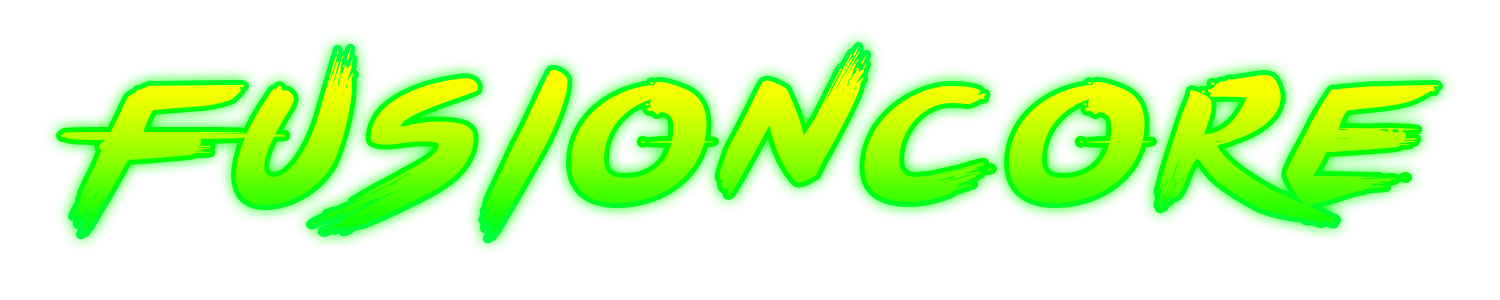
<style>
.page{position:relative;width:1500px;height:300px;background:#ffffff}
.page>*{position:absolute;margin:0}
.t1{font:229.2px "BRUSHSTRIKE";letter-spacing:0.1em}
</style>
<div class="page">
<p class="t1" style="left:60px;top:46px;width:1379px;height:193px">Fusioncore</p>
</div>
